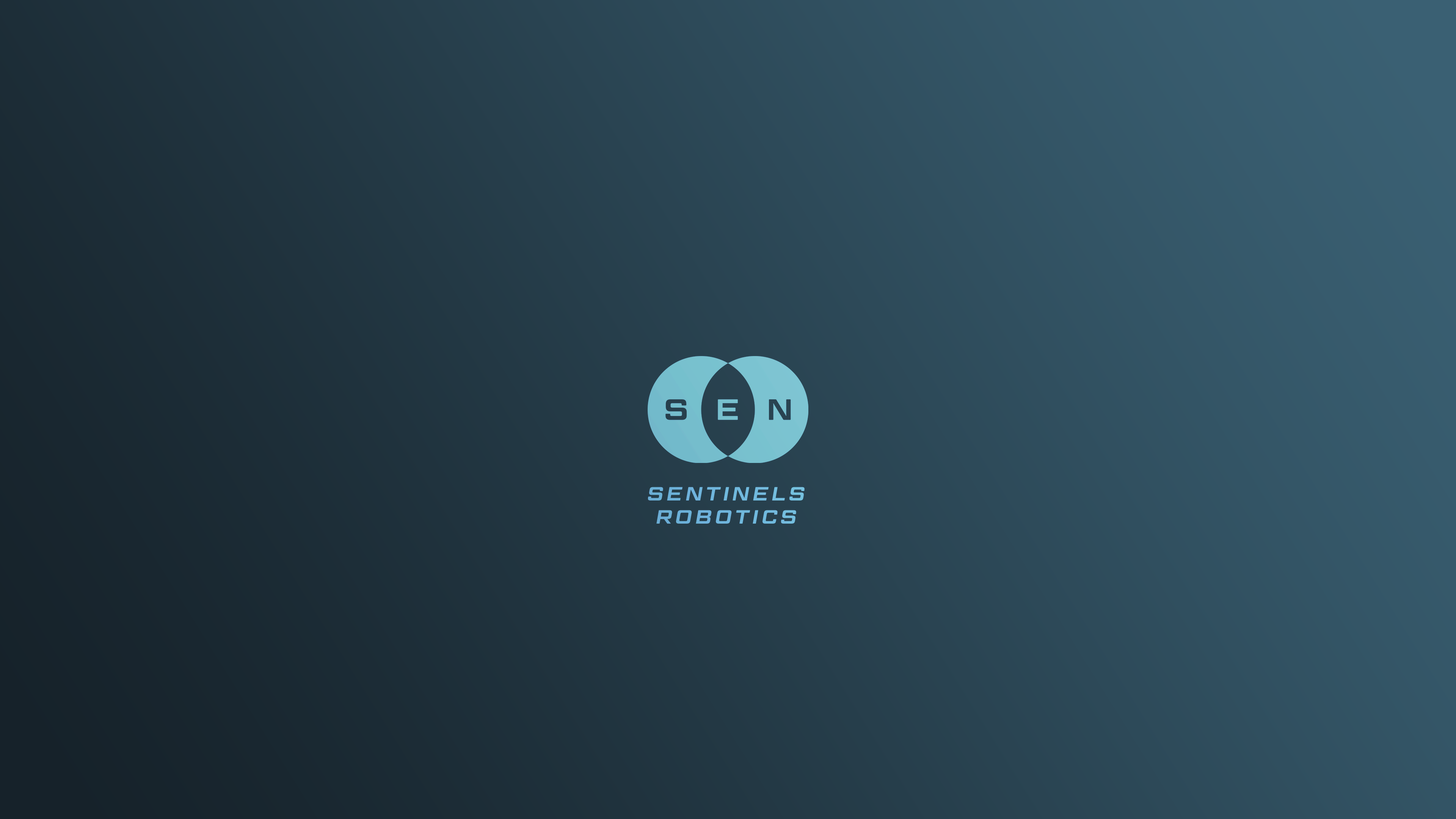
<style>
.page{position:relative;width:1456px;height:819px}
.page>*{position:absolute;margin:0}
.t1{font:19.2px "GeomGraphicW03-SemiBoldIt";letter-spacing:0.2em;color:#6fb5dc}
</style>
<div class="page">
<p class="t1" style="left:648px;top:487px;width:157px;height:37px;text-align:center">SENTINELS<br>ROBOTICS</p>
<p class="t1" style="left:648px;top:487px;width:157px;height:37px;text-align:center">SENTINELS<br>ROBOTICS</p>
</div>
